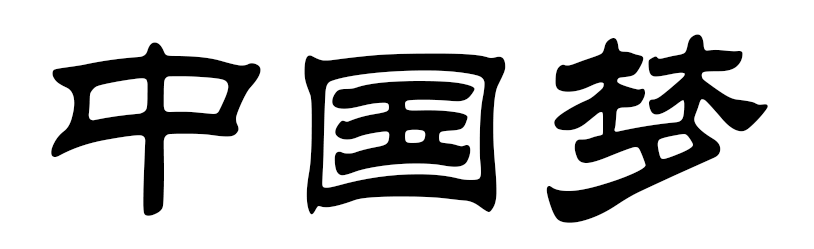
<style>
.page{position:relative;width:814px;height:249px;background:#ffffff}
.page>*{position:absolute;margin:0}
.t1{font:250px "STLiti";color:#000000}
</style>
<div class="page">
<p class="t1" style="left:51px;top:34px;width:717px;height:189px">中国梦</p>
</div>
